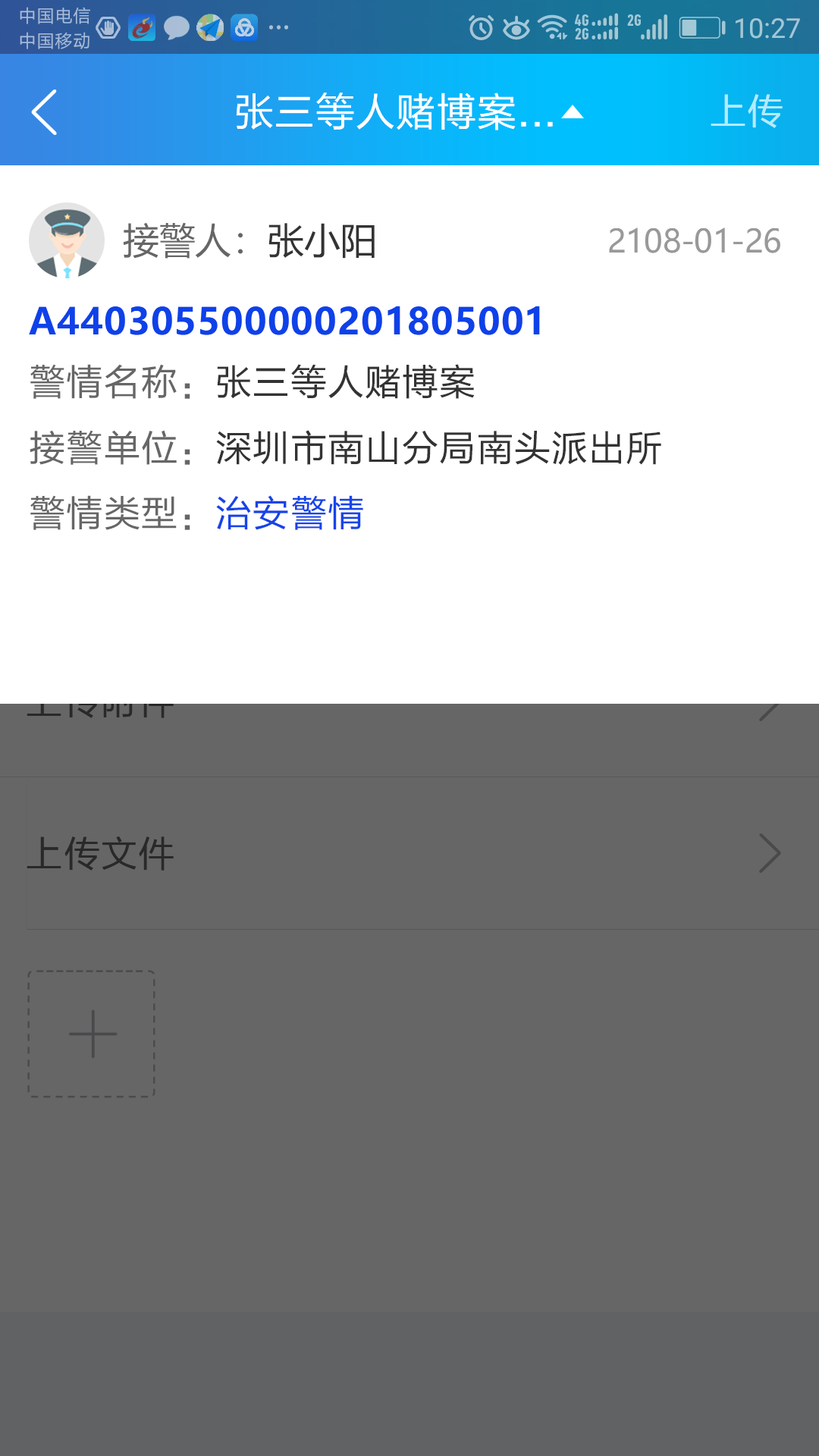
<style>
.page{position:relative;width:819px;height:1456px;background:#666666}
.page>*{position:absolute;margin:0}
.t1{font:39.4px "FZLTHK--GBK1-0";letter-spacing:0.025em;color:#ffffff}
.t2{font:36.4px "FZLTHK--GBK1-0";letter-spacing:0.025em;color:#b2ebff}
.t3{font:36.4px "MicrosoftYaHei";color:#666666}
.t4{font:36.4px "MicrosoftYaHei";color:#333333}
.t5{font:31.8px "MicrosoftYaHei";letter-spacing:-0.01em;color:#999999}
.t6{font:36.4px "MicrosoftYaHei-Bold";letter-spacing:0.025em;color:#0e41e9}
.t7{font:36.4px "FZLTHK--GBK1-0";letter-spacing:0.025em;color:#333333}
.t8{font:36.4px "FZLTHK--GBK1-0";letter-spacing:0.025em;color:#666666}
.t9{font:36.4px "FZLTHK--GBK1-0";letter-spacing:0.025em;color:#1544e9}
.t10{font:36.4px "FZLTHK--GBK1-0";letter-spacing:0.025em;color:#292929}
</style>
<div class="page">
<p class="t1" style="left:236px;top:93px;width:317px;height:37px">张三等人赌博案...</p>
<p class="t2" style="left:711px;top:94px;width:72px;height:34px">上传</p>
<p class="t3" style="left:123px;top:222px;width:252px;height:37px">接警人：<span class="t4">张小阳</span></p>
<p class="t5" style="left:609px;top:227px;width:171px;height:26px">2108-01-26</p>
<p class="t6" style="left:29px;top:306px;width:511px;height:29px">A440305500000201805001</p>
<p class="t7" style="left:30px;top:364px;width:445px;height:35px"><span class="t8">警情名称：</span>张三等人赌博案</p>
<p class="t7" style="left:30px;top:430px;width:631px;height:35px"><span class="t8">接警单位：</span>深圳市南山分局南头派出所</p>
<p class="t8" style="left:30px;top:495px;width:333px;height:35px">警情类型：<span class="t9">治安警情</span></p>
<p class="t10" style="left:27px;top:836px;width:147px;height:35px">上传文件</p>
</div>
